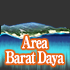
<style>
.page{position:relative;width:70px;height:70px;background:#333333}
.page>*{position:absolute;margin:0}
.t1{font:16px/15px "RyuminPro-ExBold";letter-spacing:-0.075em;color:#ffffff;scale:0.75 1}
</style>
<div class="page">
<p class="t1" style="left:5px;top:36px;width:59px;height:30px;text-align:center">Area<br>Barat Daya</p>
</div>
